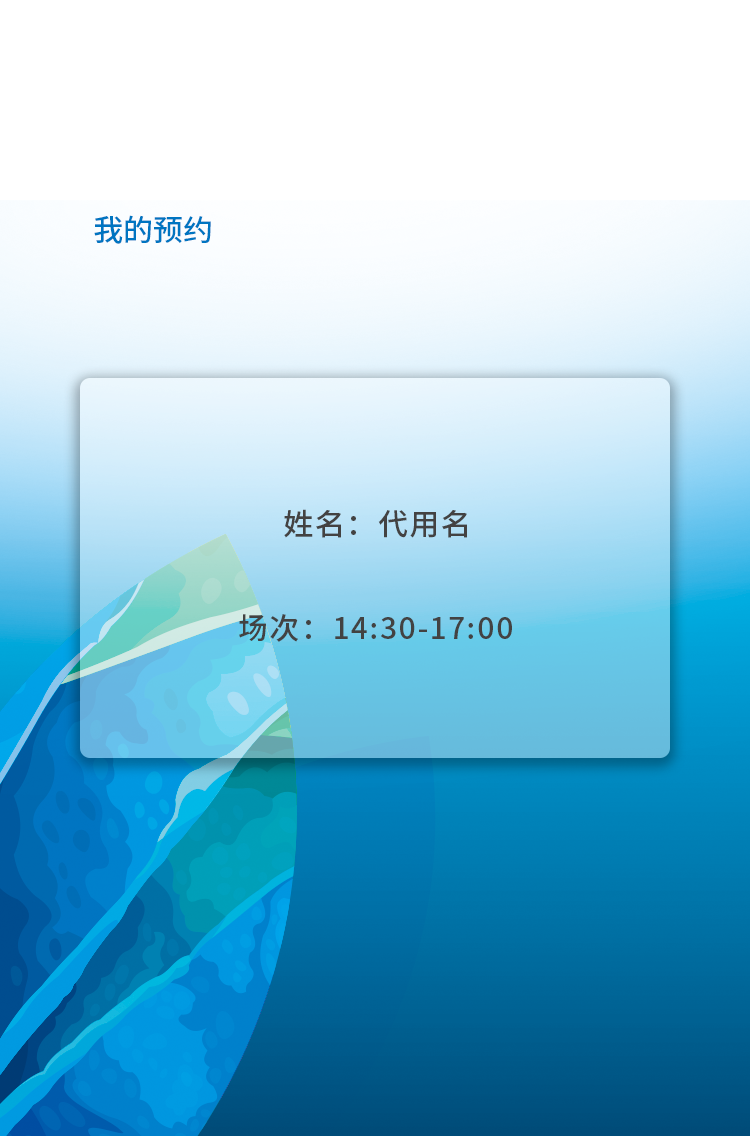
<style>
.page{position:relative;width:750px;height:1136px}
.page>*{position:absolute;margin:0}
.t1{font:30px "SourceHanSansCN-Medium";color:#0075c1}
.t2{font:30px "SourceHanSansCN-Medium";letter-spacing:0.05em;color:#434242}
</style>
<div class="page">
<p class="t1" style="left:94px;top:215px;width:117px;height:29px">我的预约</p>
<p class="t2" style="left:284px;top:509px;width:183px;height:29px">姓名：代用名</p>
<p class="t2" style="left:239px;top:614px;width:273px;height:28px">场次：14:30-17:00</p>
</div>
